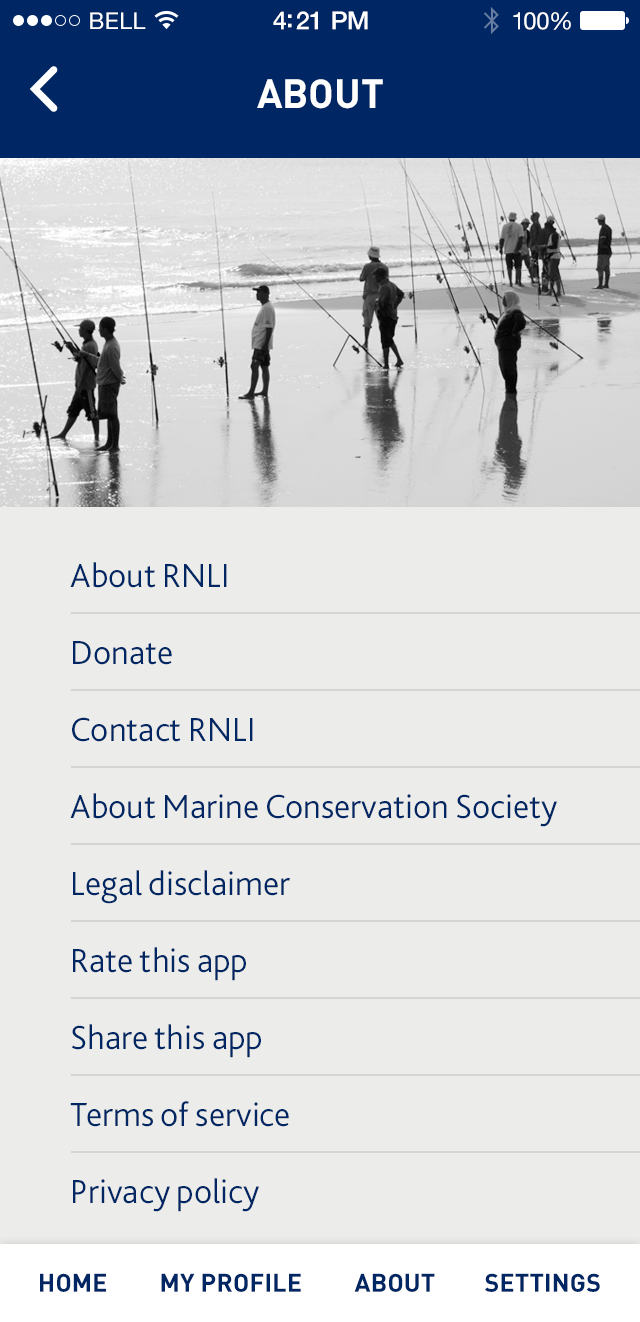
<style>
.page{position:relative;width:640px;height:1322px;background:#ecedeb}
.page>*{position:absolute;margin:0}
.t1{font:23px "HelveticaNeue";letter-spacing:0.02em;color:#ffffff}
.t2{font:25px "HelveticaNeue-Medium";letter-spacing:-0.02em;color:#ffffff}
.t3{font:24px "HelveticaNeue";letter-spacing:-0.02em;color:#ffffff}
.t4{font:40px "DIN-Bold";color:#ffffff;text-transform:uppercase}
.t5{font:35px "Bliss2-Light";color:#002663}
.t6{font:25px "DIN-Bold";letter-spacing:0.01em;color:#002663;text-transform:uppercase}
</style>
<div class="page">
<p class="t1" style="left:90px;top:12px;width:56px;height:17px">BELL</p>
<p class="t2" style="left:273px;top:11px;width:95px;height:19px">4:21 PM</p>
<p class="t3" style="left:513px;top:12px;width:58px;height:18px">100%</p>
<p class="t4" style="left:257px;top:79px;width:126px;height:30px">About</p>
<p class="t5" style="left:70px;top:562px;width:487px;height:650px">About RNLI<br>Donate<br>Contact RNLI<br>About Marine Conservation Society<br>Legal disclaimer<br>Rate this app<br>Share this app<br>Terms of service<br>Privacy policy</p>
<p class="t6" style="left:40px;top:1273px;width:66px;height:19px">Home</p>
<p class="t6" style="left:161px;top:1273px;width:140px;height:19px">My Profile</p>
<p class="t6" style="left:354px;top:1273px;width:81px;height:19px">About</p>
<p class="t6" style="left:485px;top:1273px;width:115px;height:19px">Settings</p>
</div>
